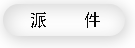
<style>
.page{position:relative;width:135px;height:48px}
.page>*{position:absolute;margin:0}
.t1{font:17px "SimHei";color:#0a0a0a}
</style>
<div class="page">
<p class="t1" style="left:31px;top:12px;width:69px;height:16px">派    件</p>
</div>
